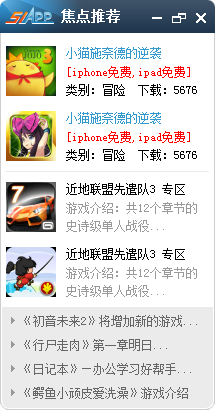
<style>
.page{position:relative;width:215px;height:410px;background:#ffffff}
.page>*{position:absolute;margin:0}
.t1{font:14px "SimSun";color:#ffffff;font-weight:bold}
.t2{font:12px "SimSun";color:#3399cc}
.t3{font:12px/18px "SimSun";color:#ff0000}
.t4{font:12px/18px "SimSun";color:#000000}
.t5{font:12px "SimSun";color:#000000}
.t6{font:12px/18px "SimSun";color:#999999}
.t7{font:12px/24px "SimSun";color:#666666}
</style>
<div class="page">
<p class="t1" style="left:61px;top:9px;width:59px;height:14px">焦点推荐</p>
<p class="t2" style="left:66px;top:47px;width:95px;height:12px">小猫施奈德的逆袭</p>
<p class="t3" style="left:66px;top:66px;width:131px;height:30px">[iphone免费,ipad免费]<br><span class="t4">类别：冒险  下载：5676</span></p>
<p class="t2" style="left:66px;top:112px;width:95px;height:12px">小猫施奈德的逆袭</p>
<p class="t3" style="left:66px;top:131px;width:131px;height:30px">[iphone免费,ipad免费]<br><span class="t4">类别：冒险  下载：5676</span></p>
<p class="t5" style="left:66px;top:183px;width:119px;height:12px">近地联盟先遣队3 专区</p>
<p class="t6" style="left:66px;top:202px;width:131px;height:30px">游戏介绍：共12个章节的<br>史诗级单人战役...</p>
<p class="t5" style="left:66px;top:248px;width:119px;height:12px">近地联盟先遣队3 专区</p>
<p class="t6" style="left:66px;top:267px;width:131px;height:30px">游戏介绍：共12个章节的<br>史诗级单人战役...</p>
<p class="t7" style="left:24px;top:315px;width:173px;height:84px">《初音未来2》将增加新的游戏...<br>《行尸走肉》第一章明日...<br>《日记本》—办公学习好帮手...<br>《鳄鱼小顽皮爱洗澡》游戏介绍</p>
</div>
